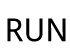
<style>
.page{position:relative;width:70px;height:55px;background:#ffffff}
.page>*{position:absolute;margin:0}
.t1{font:31.8px "DroidSans";color:#000000}
</style>
<div class="page">
<p class="t1" style="left:7px;top:18px;width:59px;height:24px">RUN</p>
</div>
